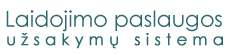
<style>
.page{position:relative;width:229px;height:55px;background:#ffffff}
.page>*{position:absolute;margin:0}
.t1{font:22px "CenturyGothic";color:#2c696e}
.t2{font:16px "CenturyGothic";letter-spacing:0.31em;color:#2c696e;font-weight:bold}
</style>
<div class="page">
<p class="t1" style="left:6px;top:10px;width:216px;height:22px">Laidojimo paslaugos</p>
<p class="t2" style="left:7px;top:33px;width:216px;height:16px">užsakymų sistema</p>
</div>
